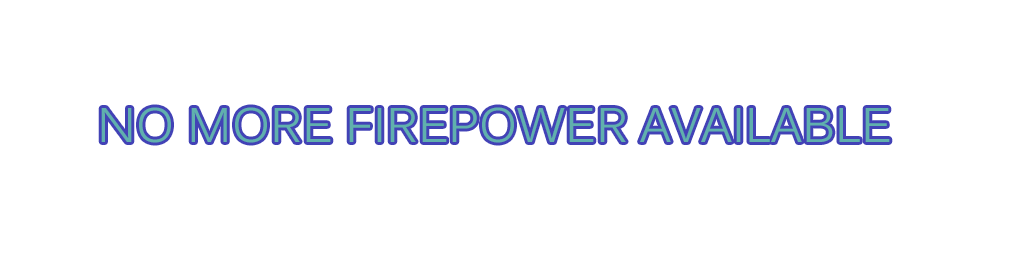
<style>
.page{position:relative;width:1024px;height:256px;background:#ffffff}
.page>*{position:absolute;margin:0}
.t1{font:48px "Kalinga";color:#60b0ad}
</style>
<div class="page">
<p class="t1" style="left:101px;top:107px;width:789px;height:36px">NO MORE FIREPOWER AVAILABLE</p>
</div>
